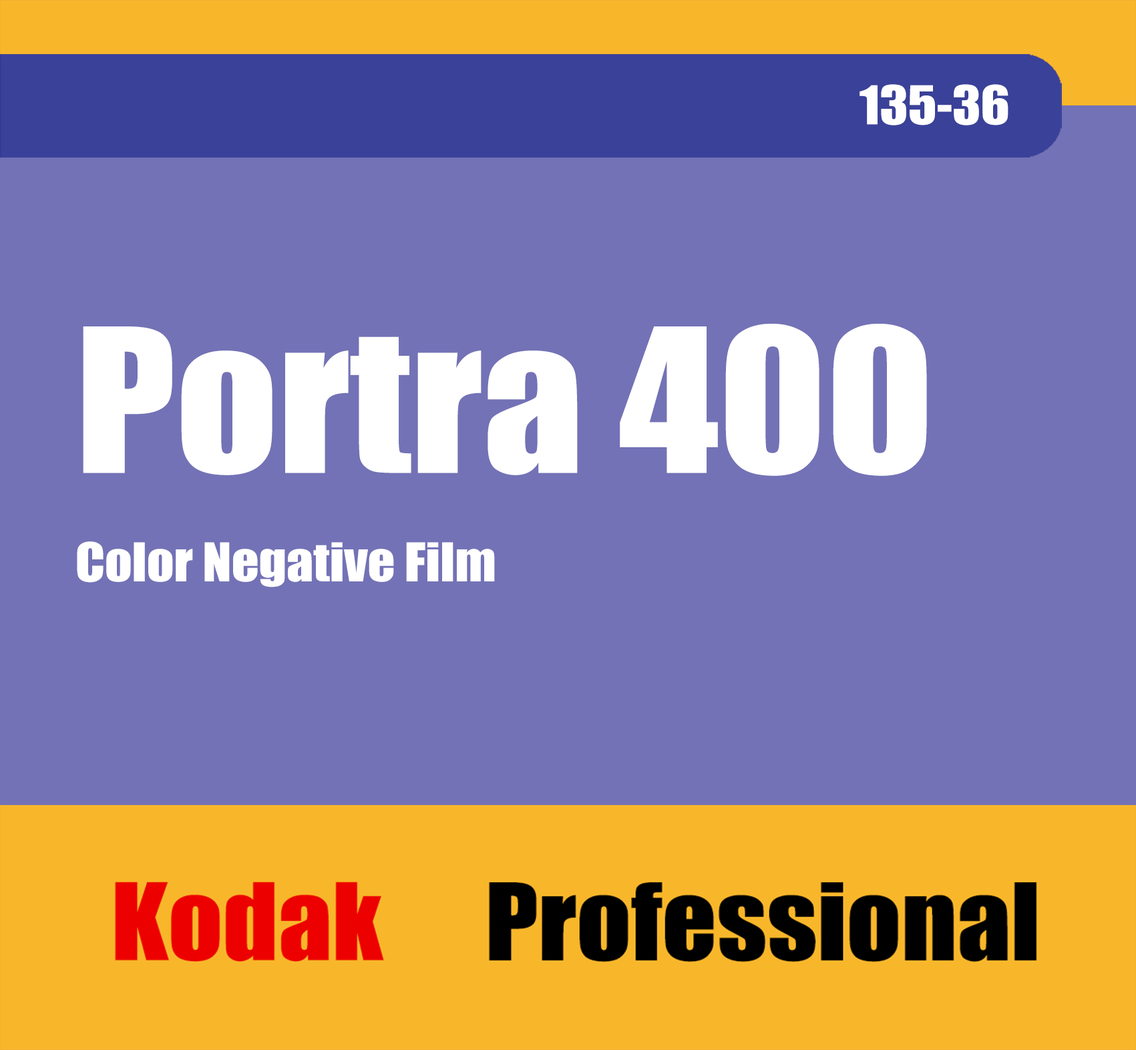
<style>
.page{position:relative;width:1136px;height:1050px;background:#7372b6}
.page>*{position:absolute;margin:0}
.t1{font:49.4px "Impact";color:#ffffff;scale:1.08 1}
.t2{font:185.2px "Impact";color:#ffffff;scale:1.08 1}
</style>
<div class="page">
<p class="t1" style="left:859px;top:84px;width:149px;height:42px">135-36</p>
<p class="t2" style="left:83px;top:324px;width:844px;height:152px">Portra 400</p>
<p class="t1" style="left:77px;top:541px;width:418px;height:46px">Color Negative Film</p>
</div>
